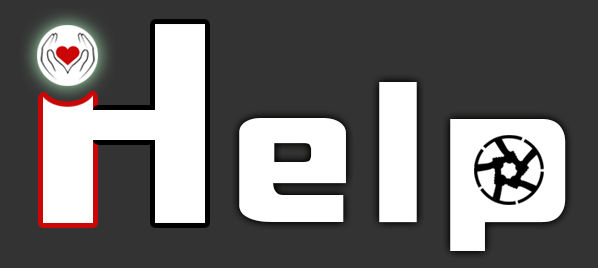
<style>
.page{position:relative;width:598px;height:268px;background:#333333}
.page>*{position:absolute;margin:0}
.t1{font:170.1px "BlackthornsDemo-Black";letter-spacing:0.05em;color:#ffffff;scale:1.12 1}
</style>
<div class="page">
<p class="t1" style="left:239px;top:82px;width:327px;height:169px">elp</p>
</div>
